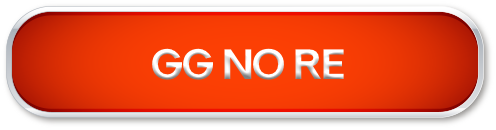
<style>
.page{position:relative;width:496px;height:130px}
.page>*{position:absolute;margin:0}
.t1{font:43.2px "Sk-Modernist-Bold";letter-spacing:-0.024em}
</style>
<div class="page">
<p class="t1" style="left:152px;top:48px;width:192px;height:32px">GG NO RE</p>
</div>
